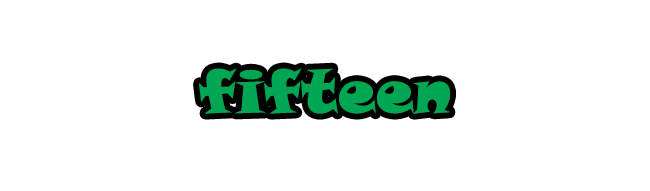
<style>
.page{position:relative;width:650px;height:191px;background:#ffffff}
.page>*{position:absolute;margin:0}
.t1{font:60px "SnapITC-Regular";color:#00a651}
</style>
<div class="page">
<p class="t1" style="left:199px;top:68px;width:251px;height:46px">fifteen</p>
</div>
